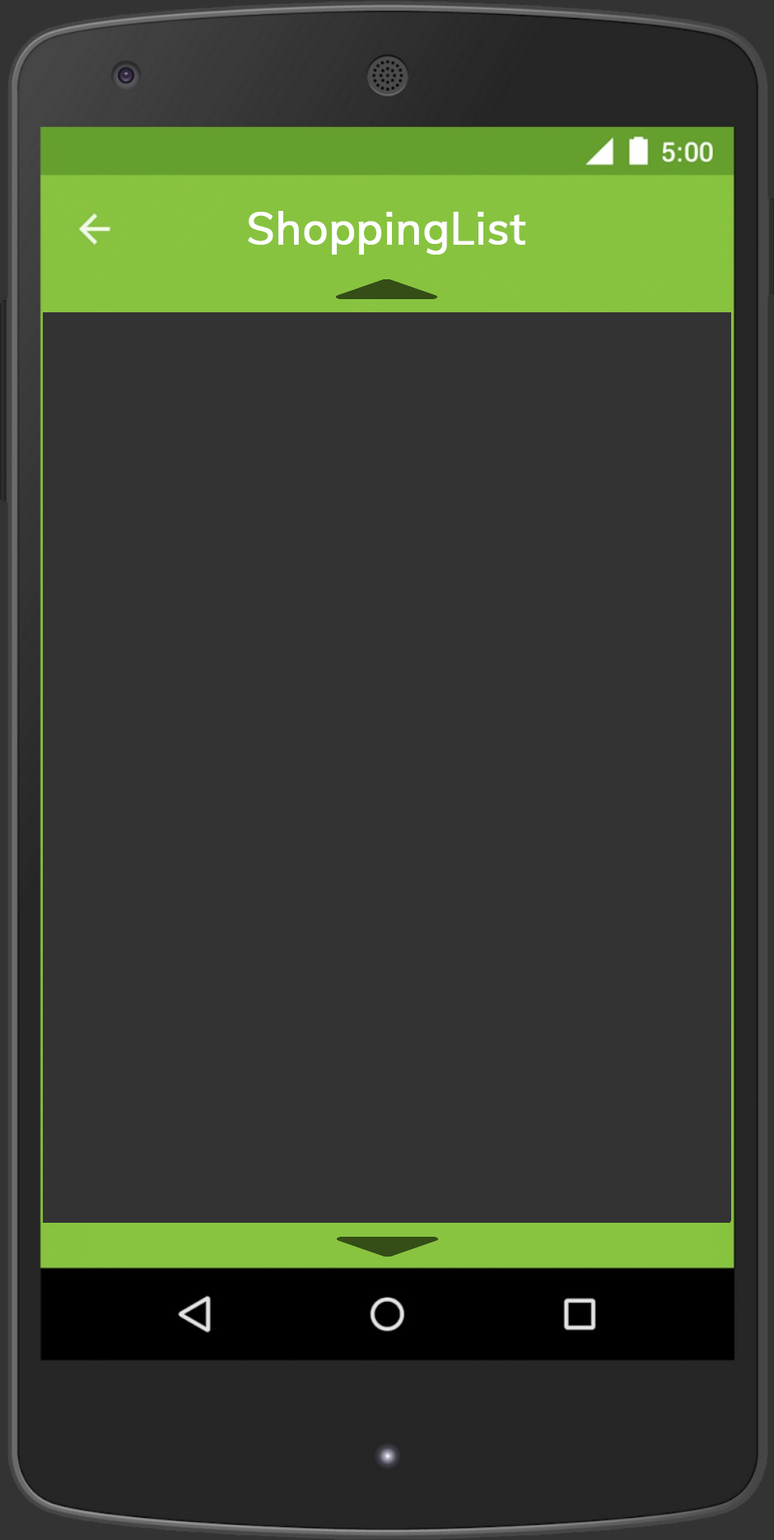
<style>
.page{position:relative;width:774px;height:1540px;background:#333333}
.page>*{position:absolute;margin:0}
.t1{font:44.1px "Muli-Regular";color:#ffffff;font-weight:bold}
</style>
<div class="page">
<p class="t1" style="left:248px;top:211px;width:278px;height:44px">ShoppingList</p>
</div>
